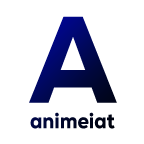
<style>
.page{position:relative;width:144px;height:144px;background:#ffffff}
.page>*{position:absolute;margin:0}
.t1{font:122.5px "Nexa-Heavy";scale:0.89 1}
.t2{font:21.8px "Nexa-Heavy";color:#000523;scale:0.89 1}
</style>
<div class="page">
<p class="t1" style="left:29px;top:16px;width:88px;height:87px">A</p>
<p class="t2" style="left:30px;top:112px;width:85px;height:17px">animeiat</p>
</div>
